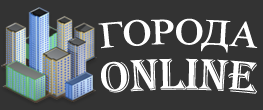
<style>
.page{position:relative;width:263px;height:110px;background:#333333}
.page>*{position:absolute;margin:0}
.t1{font:36.7px/45.5px "TimesNewRomanPSMT";color:#ffffff}
.t2{font:45.8px/45.5px "Algerian";color:#ffffff}
</style>
<div class="page">
<p class="t1" style="left:98px;top:18px;width:160px;height:76px;text-align:center">ГОРОДА<br><span class="t2">Online</span></p>
</div>
